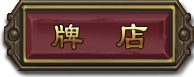
<style>
.page{position:relative;width:194px;height:77px}
.page>*{position:absolute;margin:0}
.t1{font:39.3px "LiSu";scale:0.83 1}
</style>
<div class="page">
<p class="t1" style="left:51px;top:23px;width:97px;height:26px">牌  店</p>
</div>
